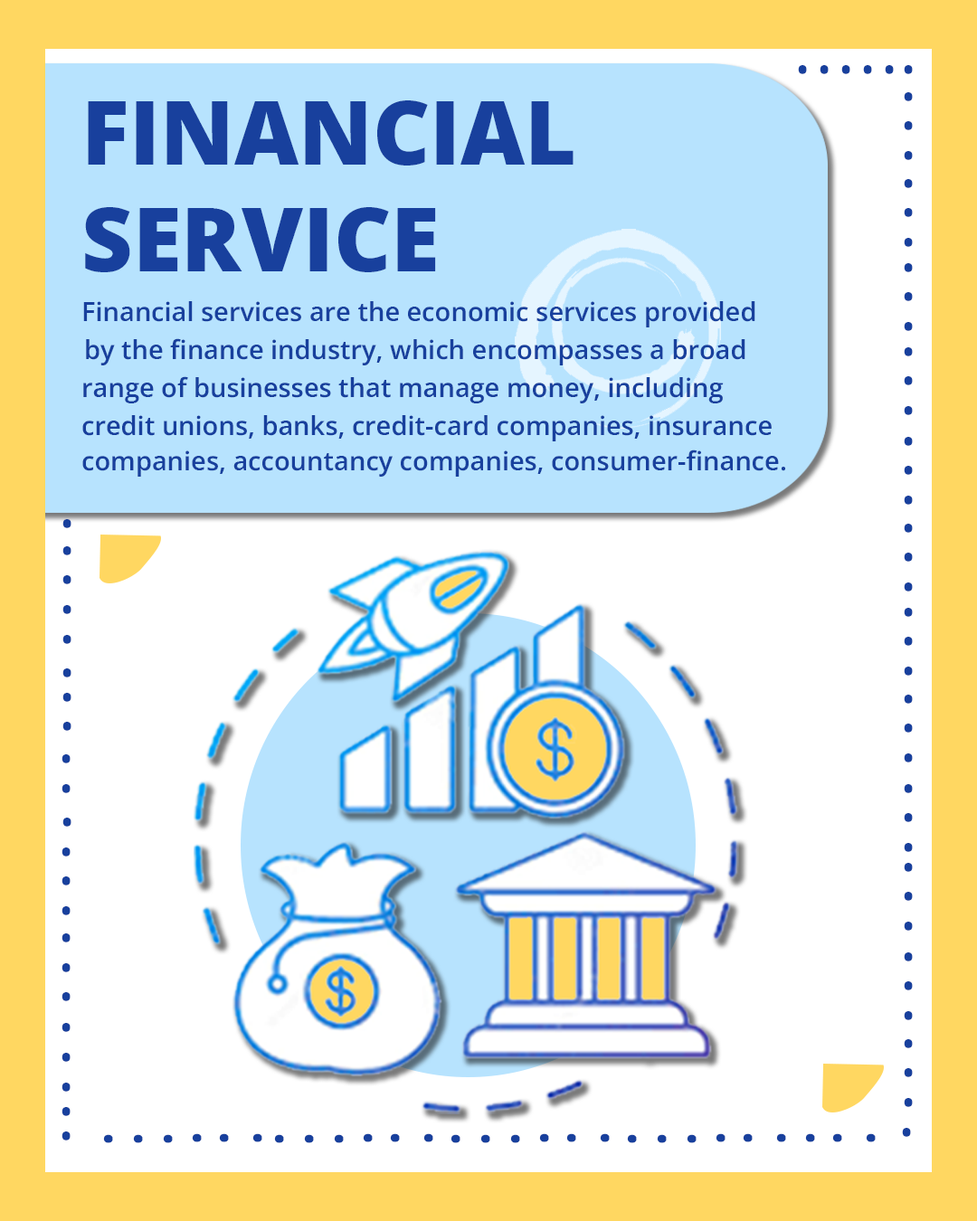
<style>
.page{position:relative;width:977px;height:1221px;background:#ffffff}
.page>*{position:absolute;margin:0}
.t1{font:61.5px "OpenSansRoman-CondensedSemiBold";color:#18409d;text-transform:uppercase}
.t2{font:88.6px "OpenSansRoman-ExtraBold";color:#18409d;text-transform:uppercase}
.t3{font:26.2px "OpenSansRoman-SemiBold";color:#18409d}
</style>
<div class="page">
<p class="t1" style="left:798px;top:65px;width:9px;height:9px">.</p>
<p class="t1" style="left:819px;top:65px;width:9px;height:9px">.</p>
<p class="t1" style="left:841px;top:65px;width:9px;height:9px">.</p>
<p class="t1" style="left:863px;top:65px;width:9px;height:9px">.</p>
<p class="t1" style="left:884px;top:65px;width:10px;height:9px">.</p>
<p class="t1" style="left:903px;top:65px;width:9px;height:9px">.</p>
<p class="t2" style="left:85px;top:100px;width:488px;height:172px">Financial <br>Service</p>
<p class="t1" style="left:903px;top:92px;width:9px;height:9px">.</p>
<p class="t1" style="left:903px;top:121px;width:9px;height:9px">.</p>
<p class="t1" style="left:903px;top:151px;width:9px;height:9px">.</p>
<p class="t1" style="left:903px;top:179px;width:9px;height:9px">.</p>
<p class="t1" style="left:903px;top:208px;width:9px;height:9px">.</p>
<p class="t1" style="left:903px;top:238px;width:9px;height:9px">.</p>
<p class="t1" style="left:903px;top:263px;width:9px;height:9px">.</p>
<p class="t1" style="left:903px;top:292px;width:9px;height:9px">.</p>
<p class="t3" style="left:83px;top:301px;width:672px;height:26px">Financial services are the economic services provided</p>
<p class="t1" style="left:903px;top:322px;width:9px;height:9px">.</p>
<p class="t3" style="left:86px;top:338px;width:659px;height:27px">by the finance industry, which encompasses a broad</p>
<p class="t1" style="left:903px;top:347px;width:9px;height:9px">.</p>
<p class="t3" style="left:83px;top:376px;width:640px;height:27px">range of businesses that manage money, including</p>
<p class="t1" style="left:903px;top:376px;width:9px;height:9px">.</p>
<p class="t1" style="left:903px;top:406px;width:9px;height:9px">.</p>
<p class="t3" style="left:82px;top:415px;width:689px;height:26px">credit unions, banks, credit-card companies, insurance</p>
<p class="t1" style="left:903px;top:437px;width:9px;height:9px">.</p>
<p class="t3" style="left:82px;top:449px;width:703px;height:28px">companies, accountancy companies, consumer-finance.</p>
<p class="t1" style="left:903px;top:466px;width:9px;height:9px">.</p>
<p class="t1" style="left:903px;top:496px;width:9px;height:9px">.</p>
<p class="t1" style="left:62px;top:519px;width:9px;height:9px">.</p>
<p class="t1" style="left:903px;top:524px;width:9px;height:9px">.</p>
<p class="t1" style="left:62px;top:546px;width:9px;height:9px">.</p>
<p class="t1" style="left:903px;top:553px;width:9px;height:9px">.</p>
<p class="t1" style="left:62px;top:575px;width:9px;height:9px">.</p>
<p class="t1" style="left:903px;top:582px;width:9px;height:9px">.</p>
<p class="t1" style="left:62px;top:605px;width:9px;height:9px">.</p>
<p class="t1" style="left:903px;top:608px;width:9px;height:9px">.</p>
<p class="t1" style="left:62px;top:635px;width:9px;height:9px">.</p>
<p class="t1" style="left:903px;top:637px;width:9px;height:9px">.</p>
<p class="t1" style="left:62px;top:668px;width:9px;height:9px">.</p>
<p class="t1" style="left:903px;top:667px;width:9px;height:9px">.</p>
<p class="t1" style="left:62px;top:693px;width:9px;height:9px">.</p>
<p class="t1" style="left:903px;top:695px;width:9px;height:9px">.</p>
<p class="t1" style="left:62px;top:722px;width:9px;height:9px">.</p>
<p class="t1" style="left:903px;top:723px;width:9px;height:10px">.</p>
<p class="t1" style="left:61px;top:754px;width:10px;height:9px">.</p>
<p class="t1" style="left:903px;top:753px;width:9px;height:9px">.</p>
<p class="t1" style="left:61px;top:784px;width:10px;height:9px">.</p>
<p class="t1" style="left:903px;top:784px;width:9px;height:9px">.</p>
<p class="t1" style="left:62px;top:818px;width:9px;height:9px">.</p>
<p class="t1" style="left:903px;top:813px;width:9px;height:9px">.</p>
<p class="t1" style="left:903px;top:843px;width:9px;height:9px">.</p>
<p class="t1" style="left:61px;top:847px;width:10px;height:9px">.</p>
<p class="t1" style="left:903px;top:863px;width:9px;height:9px">.</p>
<p class="t1" style="left:61px;top:876px;width:10px;height:9px">.</p>
<p class="t1" style="left:903px;top:892px;width:9px;height:9px">.</p>
<p class="t1" style="left:61px;top:906px;width:10px;height:9px">.</p>
<p class="t1" style="left:903px;top:922px;width:9px;height:9px">.</p>
<p class="t1" style="left:61px;top:933px;width:10px;height:9px">.</p>
<p class="t1" style="left:903px;top:952px;width:9px;height:9px">.</p>
<p class="t1" style="left:61px;top:963px;width:10px;height:9px">.</p>
<p class="t1" style="left:903px;top:981px;width:9px;height:9px">.</p>
<p class="t1" style="left:61px;top:992px;width:10px;height:9px">.</p>
<p class="t1" style="left:903px;top:1011px;width:9px;height:9px">.</p>
<p class="t1" style="left:61px;top:1023px;width:10px;height:9px">.</p>
<p class="t1" style="left:903px;top:1039px;width:9px;height:9px">.</p>
<p class="t1" style="left:61px;top:1053px;width:10px;height:9px">.</p>
<p class="t1" style="left:903px;top:1068px;width:9px;height:9px">.</p>
<p class="t1" style="left:61px;top:1083px;width:10px;height:9px">.</p>
<p class="t1" style="left:903px;top:1098px;width:9px;height:9px">.</p>
<p class="t1" style="left:61px;top:1107px;width:10px;height:9px">.</p>
<p class="t1" style="left:61px;top:1131px;width:10px;height:9px">.</p>
<p class="t1" style="left:192px;top:1133px;width:10px;height:9px;rotate:90deg">.</p>
<p class="t1" style="left:219px;top:1133px;width:10px;height:9px;rotate:90deg">.</p>
<p class="t1" style="left:252px;top:1133px;width:10px;height:9px;rotate:90deg">.</p>
<p class="t1" style="left:363px;top:1133px;width:10px;height:9px;rotate:90deg">.</p>
<p class="t1" style="left:390px;top:1133px;width:10px;height:9px;rotate:90deg">.</p>
<p class="t1" style="left:423px;top:1133px;width:10px;height:9px;rotate:90deg">.</p>
<p class="t1" style="left:539px;top:1133px;width:10px;height:9px;rotate:90deg">.</p>
<p class="t1" style="left:566px;top:1133px;width:10px;height:9px;rotate:90deg">.</p>
<p class="t1" style="left:600px;top:1133px;width:10px;height:9px;rotate:90deg">.</p>
<p class="t1" style="left:715px;top:1133px;width:10px;height:9px;rotate:90deg">.</p>
<p class="t1" style="left:742px;top:1133px;width:10px;height:9px;rotate:90deg">.</p>
<p class="t1" style="left:776px;top:1133px;width:10px;height:9px;rotate:90deg">.</p>
<p class="t1" style="left:805px;top:1133px;width:10px;height:9px;rotate:90deg">.</p>
<p class="t1" style="left:832px;top:1133px;width:10px;height:9px;rotate:90deg">.</p>
<p class="t1" style="left:865px;top:1133px;width:10px;height:9px;rotate:90deg">.</p>
<p class="t1" style="left:902px;top:1128px;width:9px;height:9px">.</p>
<p class="t1" style="left:103px;top:1134px;width:10px;height:9px;rotate:90deg">.</p>
<p class="t1" style="left:133px;top:1134px;width:10px;height:9px;rotate:90deg">.</p>
<p class="t1" style="left:163px;top:1134px;width:10px;height:9px;rotate:90deg">.</p>
<p class="t1" style="left:274px;top:1134px;width:10px;height:9px;rotate:90deg">.</p>
<p class="t1" style="left:304px;top:1134px;width:10px;height:9px;rotate:90deg">.</p>
<p class="t1" style="left:334px;top:1134px;width:10px;height:9px;rotate:90deg">.</p>
<p class="t1" style="left:450px;top:1134px;width:10px;height:9px;rotate:90deg">.</p>
<p class="t1" style="left:480px;top:1134px;width:10px;height:9px;rotate:90deg">.</p>
<p class="t1" style="left:510px;top:1134px;width:10px;height:9px;rotate:90deg">.</p>
<p class="t1" style="left:627px;top:1134px;width:10px;height:9px;rotate:90deg">.</p>
<p class="t1" style="left:657px;top:1134px;width:10px;height:9px;rotate:90deg">.</p>
<p class="t1" style="left:686px;top:1134px;width:10px;height:9px;rotate:90deg">.</p>
</div>
